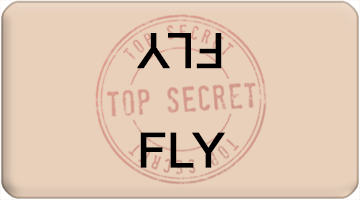
<style>
.page{position:relative;width:360px;height:200px;background:#e8d0bb}
.page>*{position:absolute;margin:0}
.t1{font:48px "ArialMT";color:#000000;font-weight:bold}
</style>
<div class="page">
<p class="t1" style="left:137px;top:33px;width:85px;height:36px;rotate:180deg">FLY</p>
<p class="t1" style="left:140px;top:132px;width:85px;height:36px">FLY</p>
</div>
